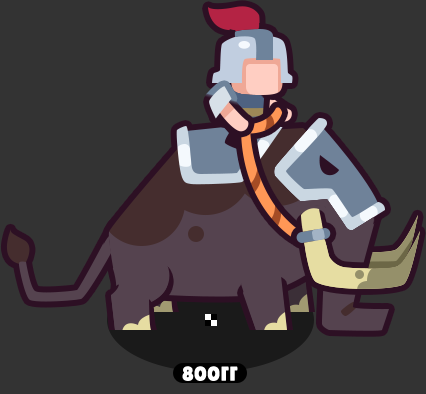
<style>
.page{position:relative;width:426px;height:394px;background:#333333}
.page>*{position:absolute;margin:0}
.t1{font:20px "LilitaOne";color:#ffffff;font-weight:bold}
</style>
<div class="page">
<p class="t1" style="left:182px;top:366px;width:56px;height:15px;rotate:180deg">11008</p>
</div>
